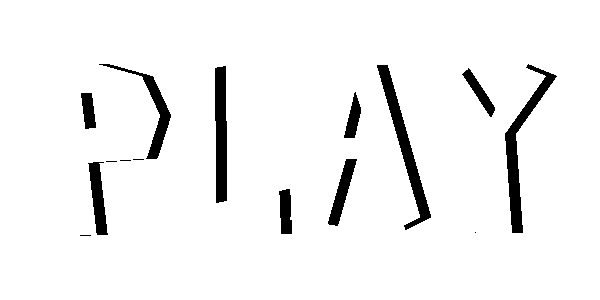
<style>
.page{position:relative;width:600px;height:300px;background:#ffffff}
.page>*{position:absolute;margin:0}
.t1{font:200px "MarioLuigiTwo";color:#ffffff}
</style>
<div class="page">
<p class="t1" style="left:63px;top:64px;width:494px;height:172px">PLAY</p>
</div>
